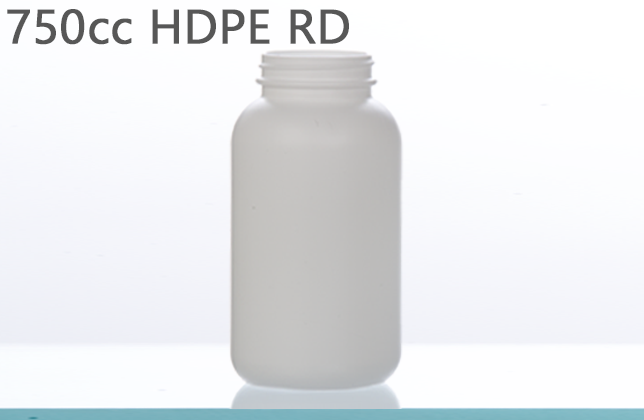
<style>
.page{position:relative;width:644px;height:420px}
.page>*{position:absolute;margin:0}
.t1{font:48px "Gadugi";color:#575757;font-weight:bold}
</style>
<div class="page">
<p class="t1" style="left:7px;top:9px;width:342px;height:36px">750cc HDPE RD</p>
</div>
